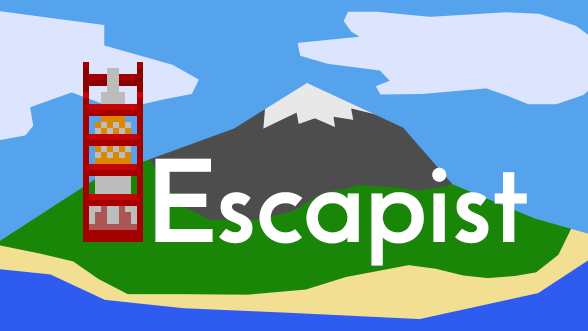
<style>
.page{position:relative;width:588px;height:331px;background:#55a3ec}
.page>*{position:absolute;margin:0}
.t1{font:114px "JosefinSans-Bold";color:#ffffff}
</style>
<div class="page">
<p class="t1" style="left:155px;top:158px;width:372px;height:108px">Escapist</p>
</div>
